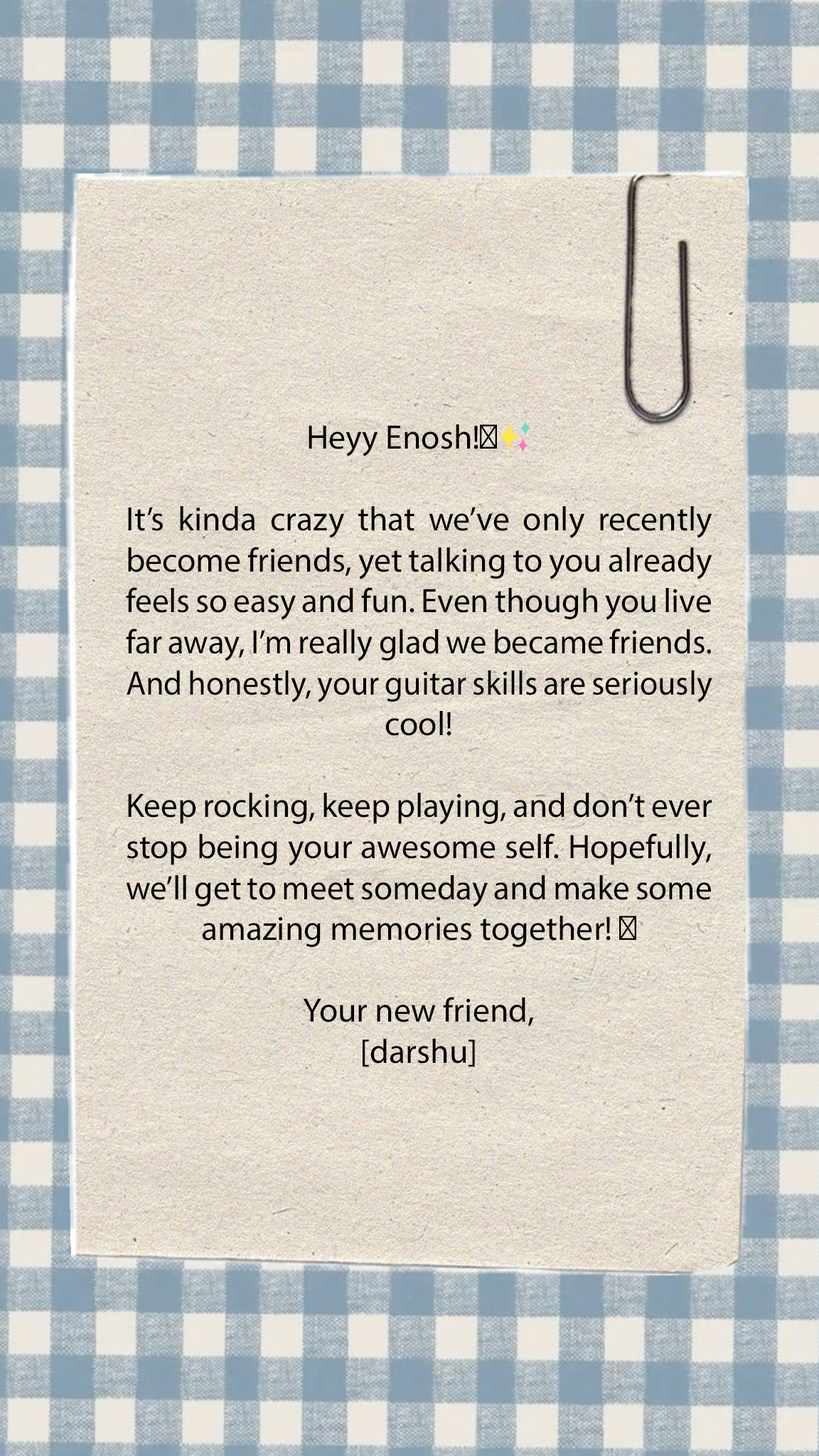
<style>
.page{position:relative;width:819px;height:1456px}
.page>*{position:absolute;margin:0}
.t1{font:34.1px "MyriadPro-Regular";color:#000000}
.t2{font:34.1px "EmojiOneColor";color:#000000}
</style>
<div class="page">
<p class="t1" style="left:126px;top:419px;width:586px;height:648px;text-align:justify">Heyy Enosh!🎸<span class="t2">✨</span><br><br>It’s kinda crazy that we’ve only recently become friends, yet talking to you already feels so easy and fun. Even though you live far away, I’m really glad we became friends. And honestly, your guitar skills are seriously cool! <br><br>Keep rocking, keep playing, and don’t ever stop being your awesome self. Hopefully, we’ll get to meet someday and make some amazing memories together! 💫<br><br>Your new friend,<br>[darshu]</p>
</div>
